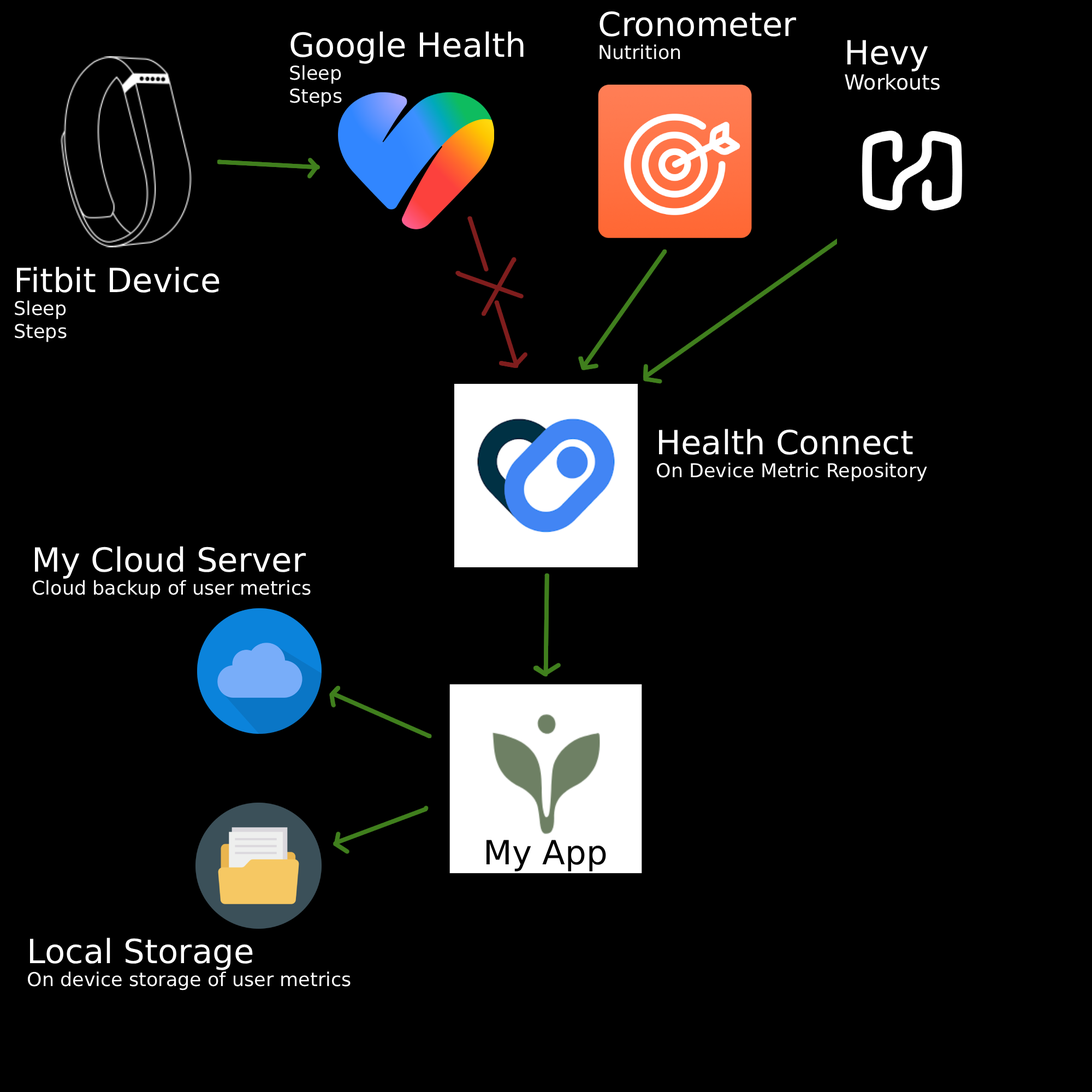
<style>
.page{position:relative;width:1092px;height:1092px;background:#000000}
.page>*{position:absolute;margin:0}
.t1{font:33.3px "DejaVuSans";color:#ffffff}
.t2{font:19.1px "DejaVuSans";color:#ffffff}
.t3{font:20.7px "DejaVuSans";color:#ffffff}
.t4{font:33.3px "DejaVuSans";color:#000000}
</style>
<div class="page">
<p class="t1" style="left:600px;top:11px;width:197px;height:49px">Cronometer <span class="t2">Nutrition</span></p>
<p class="t1" style="left:290px;top:31px;width:234px;height:76px">Google Health <br><span class="t2">Sleep<br>Steps</span></p>
<p class="t3" style="left:845px;top:40px;width:95px;height:50px"><span class="t1">Hevy <br></span>Workouts</p>
<p class="t1" style="left:15px;top:266px;width:204px;height:76px">Fitbit Device<br><span class="t2">Sleep<br>Steps</span></p>
<p class="t2" style="left:656px;top:429px;width:271px;height:53px"><span class="t1">Health Connect<br></span>On Device Metric Repository</p>
<p class="t2" style="left:32px;top:546px;width:279px;height:53px"><span class="t1">My Cloud Server<br></span>Cloud backup of user metrics</p>
<p class="t4" style="left:486px;top:840px;width:120px;height:31px">My App</p>
<p class="t2" style="left:27px;top:937px;width:324px;height:53px"><span class="t1">Local Storage<br></span>On device storage of user metrics</p>
</div>
